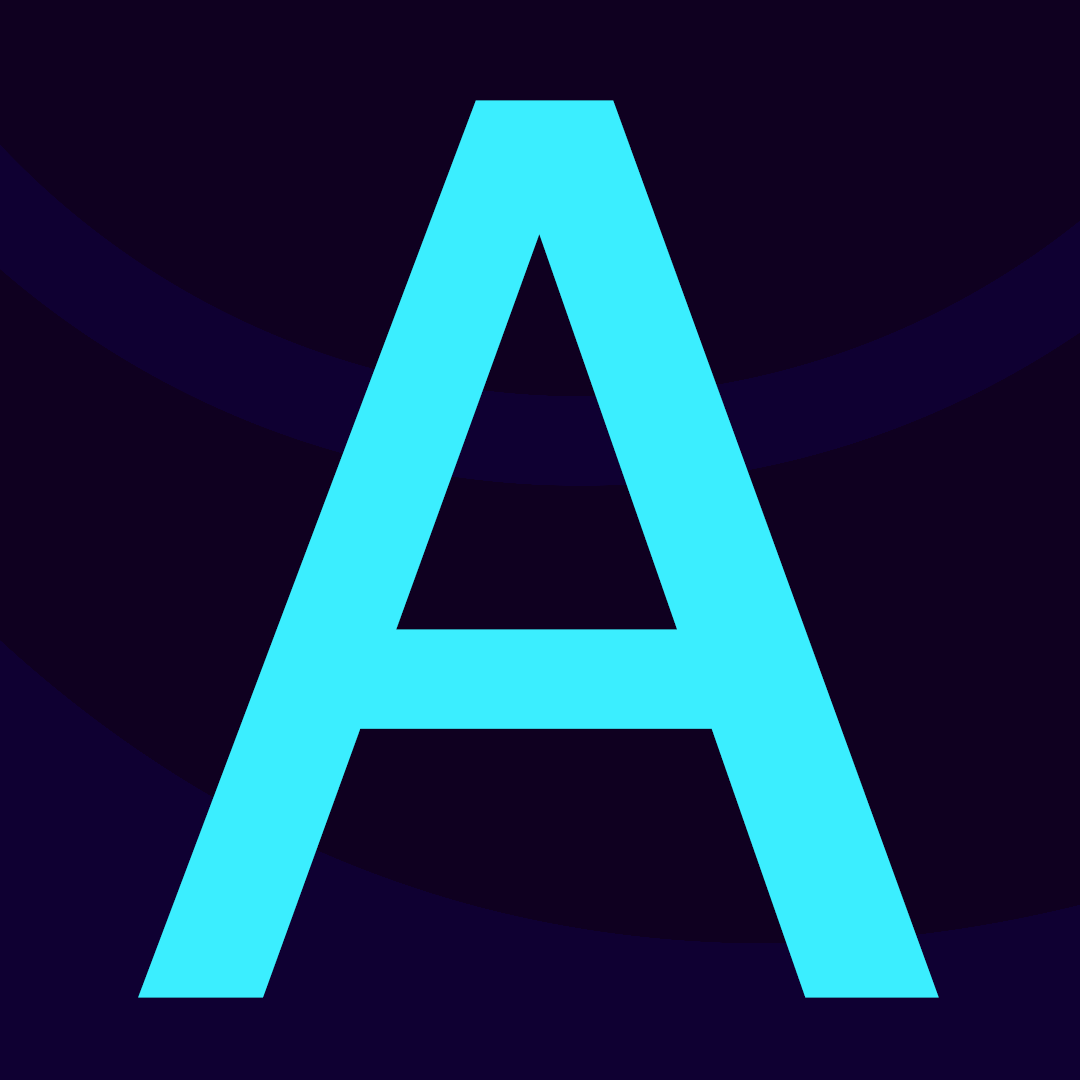
<style>
.page{position:relative;width:1080px;height:1080px;background:#0f0020}
.page>*{position:absolute;margin:0}
.t1{font:1250px "Helvetica";color:#3beeff}
</style>
<div class="page">
<p class="t1" style="left:138px;top:100px;width:801px;height:898px">A</p>
</div>
